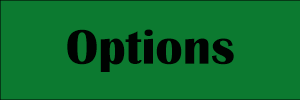
<style>
.page{position:relative;width:300px;height:100px;background:#0c7a30}
.page>*{position:absolute;margin:0}
.t1{font:50px "BritannicBold";color:#000301}
</style>
<div class="page">
<p class="t1" style="left:67px;top:29px;width:167px;height:43px">Options</p>
</div>
